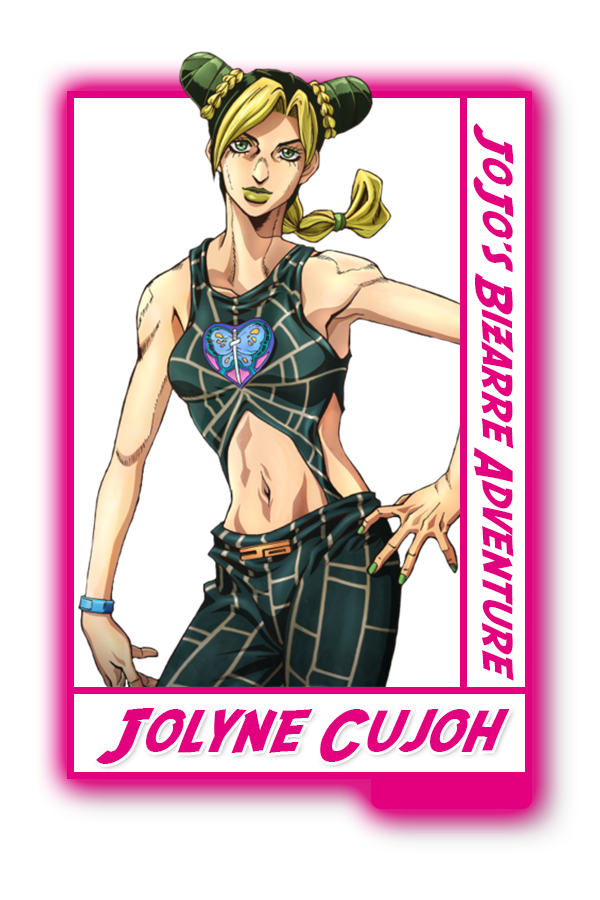
<style>
.page{position:relative;width:600px;height:900px;background:#ffffff}
.page>*{position:absolute;margin:0}
.t1{font:42.4px "SFFedora";color:#e3007e}
.t2{font:60.3px "SFFedora";color:#e3007e}
</style>
<div class="page">
<p class="t1" style="left:473px;top:123px;width:41px;height:558px;rotate:90deg">JoJo's Bizarre Adventure</p>
<p class="t2" style="left:96px;top:708px;width:414px;height:56px">Jolyne Cujoh</p>
</div>
